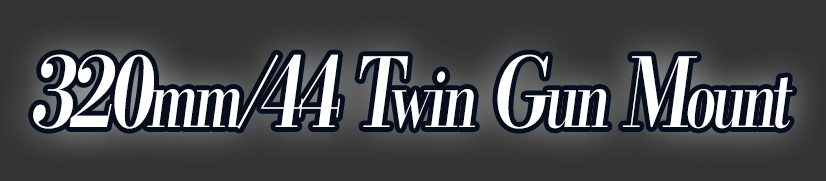
<style>
.page{position:relative;width:826px;height:181px;background:#333333}
.page>*{position:absolute;margin:0}
.t1{font:96px "KochoStd-Heavy";letter-spacing:-0.08em;color:#ffffff;font-style:italic;scale:0.74 1}
.t2{font:76.8px "KochoStd-Heavy";letter-spacing:-0.08em;color:#ffffff;font-style:italic;scale:0.74 1}
</style>
<div class="page">
<p class="t1" style="left:33px;top:54px;width:760px;height:75px">320<span class="t2">mm</span>/44 T<span class="t2">win</span> G<span class="t2">un</span> M<span class="t2">ount</span></p>
</div>
